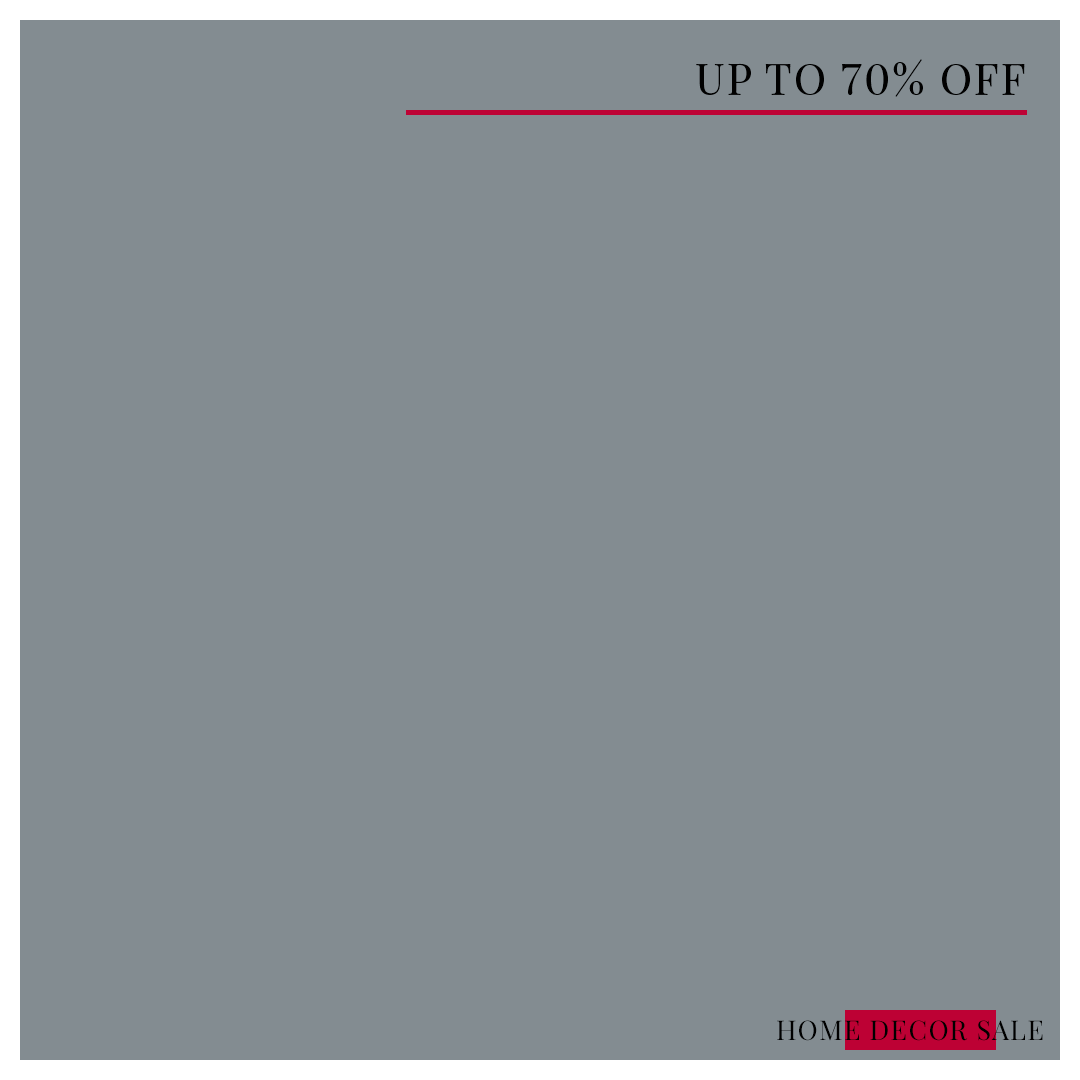
<style>
.page{position:relative;width:1080px;height:1080px;background:#838c91}
.page>*{position:absolute;margin:0}
.t1{font:43.3px "PlayfairDisplay-Regular";letter-spacing:0.05em;color:#010101;text-transform:uppercase}
.t2{font:27.1px "PlayfairDisplay-Regular";letter-spacing:0.05em;color:#000000;text-transform:uppercase}
</style>
<div class="page">
<p class="t1" style="left:696px;top:59px;width:329px;height:38px">Up To 70% Off</p>
<p class="t2" style="left:777px;top:1020px;width:266px;height:21px">Home Decor Sale</p>
</div>
